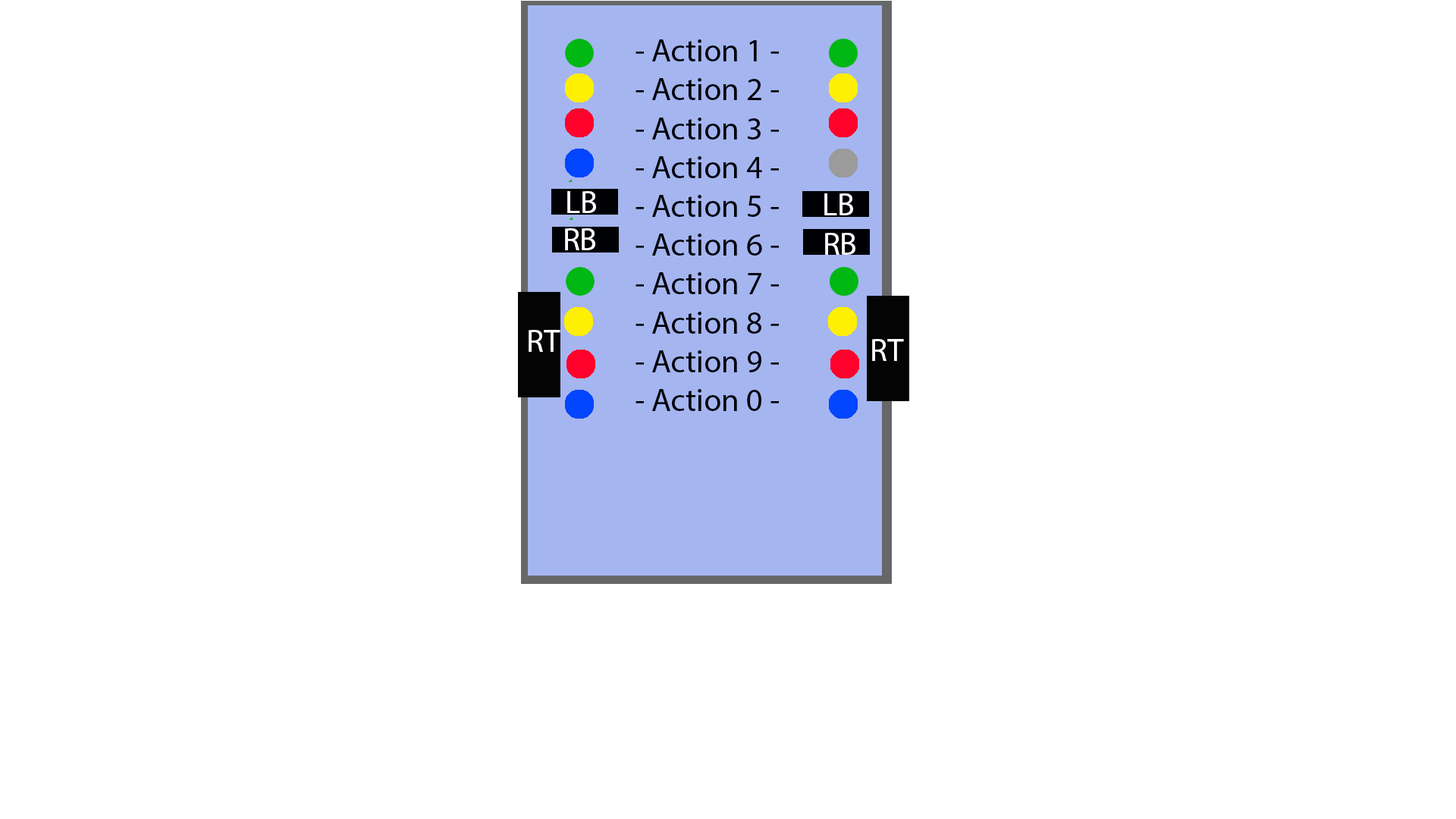
<style>
.page{position:relative;width:1456px;height:819px;background:#ffffff}
.page>*{position:absolute;margin:0}
.t1{font:9.1px "MyriadPro-Regular";color:#000103}
.t2{font:9.1px "MyriadPro-Regular";color:#ffffff}
</style>
<div class="page">
<p class="t1" style="left:635px;top:39px;width:144px;height:372px">- Action 1 -<br>  - Action 2 -<br>  - Action 3 - <br>  - Action 4 -<br>  - Action 5 -<br>  - Action 6 -<br>  - Action 7 -<br>  - Action 8 -<br>  - Action 9 -<br>  - Action 0 -</p>
<p class="t2" style="left:567px;top:191px;width:29px;height:22px">LB</p>
<p class="t2" style="left:824px;top:193px;width:29px;height:22px">LB</p>
<p class="t2" style="left:565px;top:228px;width:30px;height:22px">RB</p>
<p class="t2" style="left:825px;top:233px;width:30px;height:22px">RB</p>
<p class="t2" style="left:529px;top:330px;width:31px;height:22px">RT</p>
<p class="t2" style="left:872px;top:339px;width:32px;height:22px">RT</p>
</div>
